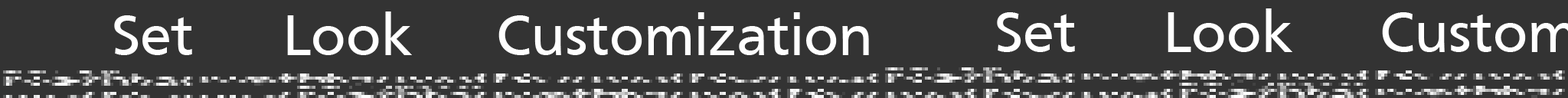
<style>
.page{position:relative;width:1568px;height:98px;background:#333333}
.page>*{position:absolute;margin:0}
.t1{font:60.2px "Frutiger";color:#ffffff}
.t2{font:59.8px "Frutiger";color:#ffffff}
</style>
<div class="page">
<p class="t1" style="left:114px;top:15px;width:78px;height:40px">Set</p>
<p class="t1" style="left:287px;top:11px;width:125px;height:44px">Look</p>
<p class="t2" style="left:498px;top:12px;width:371px;height:43px">Customization</p>
<p class="t1" style="left:997px;top:12px;width:78px;height:40px">Set</p>
<p class="t1" style="left:1168px;top:8px;width:124px;height:44px">Look</p>
</div>
